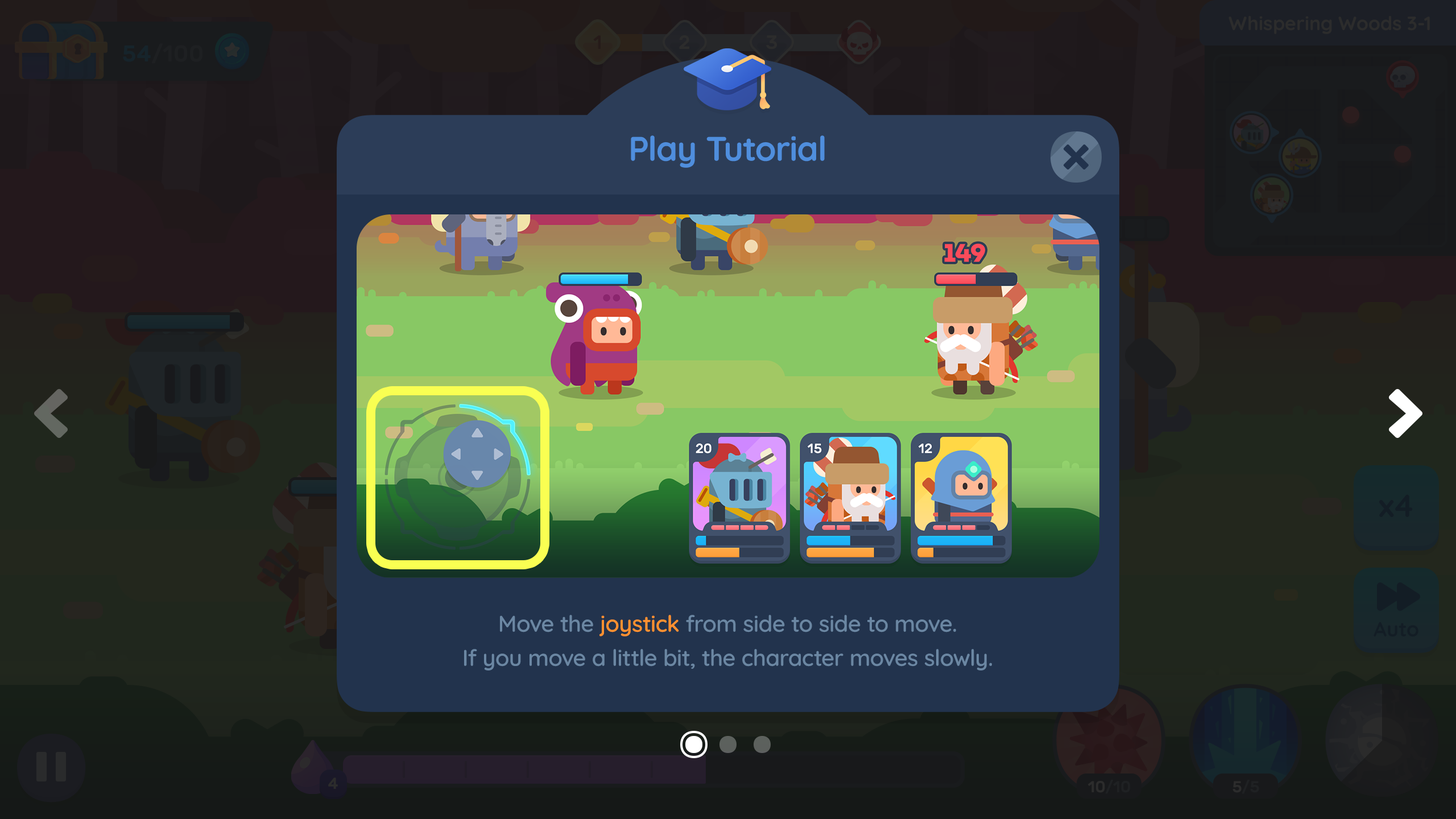
<style>
.page{position:relative;width:1456px;height:819px}
.page>*{position:absolute;margin:0}
.t1{font:34.1px "Quicksand-Bold";letter-spacing:-0.01em;color:#4f8edd}
.t2{font:22.7px/34.1px "Quicksand-SemiBold";letter-spacing:-0.01em;color:#6b87a3}
.t3{font:22.7px/34.1px "Quicksand-SemiBold";letter-spacing:-0.01em;color:#ff9130}
</style>
<div class="page">
<p class="t1" style="left:631px;top:135px;width:194px;height:33px">Play Tutorial</p>
<p class="t2" style="left:464px;top:615px;width:528px;height:56px;text-align:center">Move the <span class="t3">joystick</span> from side to side to move.<br>If you move a little bit, the character moves slowly.</p>
</div>
